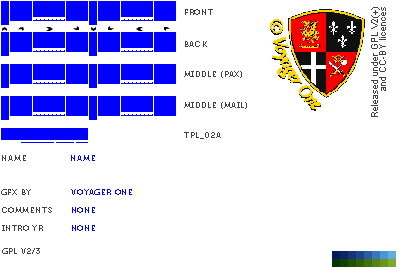
<style>
.page{position:relative;width:400px;height:270px;background:#ffffff}
.page>*{position:absolute;margin:0}
.t1{font:8px "Museo700-Regular";letter-spacing:0.075em;color:#404040;text-transform:uppercase}
.t2{font:8px "Museo700-Regular";letter-spacing:0.075em;color:#0000ff;text-transform:uppercase}
</style>
<div class="page">
<p class="t1" style="left:185px;top:9px;width:28px;height:6px">front</p>
<p class="t1" style="left:185px;top:41px;width:22px;height:6px">back</p>
<p class="t1" style="left:184px;top:71px;width:58px;height:7px">middle (pax)</p>
<p class="t1" style="left:184px;top:102px;width:63px;height:7px">middle (mail)</p>
<p class="t1" style="left:184px;top:132px;width:37px;height:7px">tpl_02a</p>
<p class="t1" style="left:2px;top:155px;width:24px;height:6px">name</p>
<p class="t2" style="left:71px;top:155px;width:24px;height:6px">name</p>
<p class="t1" style="left:1px;top:189px;width:30px;height:6px">gfx by</p>
<p class="t2" style="left:71px;top:189px;width:61px;height:6px">voyager one</p>
<p class="t1" style="left:2px;top:207px;width:50px;height:6px">comments</p>
<p class="t2" style="left:72px;top:207px;width:23px;height:6px">none</p>
<p class="t1" style="left:2px;top:225px;width:41px;height:6px">intro yr</p>
<p class="t2" style="left:72px;top:225px;width:23px;height:6px">none</p>
<p class="t1" style="left:2px;top:248px;width:38px;height:6px">gpl v2/3</p>
</div>
